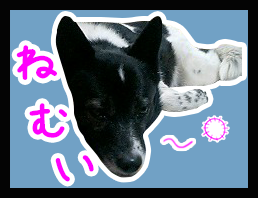
<style>
.page{position:relative;width:258px;height:198px;background:#71a1c5}
.page>*{position:absolute;margin:0}
.t1{font:61.8px "APJapanesefont";letter-spacing:-0.22em;color:#ff00fc}
</style>
<div class="page">
<p class="t1" style="left:16px;top:45px;width:41px;height:35px">ね</p>
<p class="t1" style="left:29px;top:103px;width:38px;height:35px">む</p>
<p class="t1" style="left:55px;top:155px;width:39px;height:27px">い</p>
</div>
